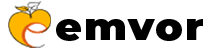
<style>
.page{position:relative;width:222px;height:49px;background:#ffffff}
.page>*{position:absolute;margin:0}
.t1{font:37.7px "Montserrat-Black";letter-spacing:0.04em;color:#000000;scale:1.09 1}
</style>
<div class="page">
<p class="t1" style="left:56px;top:19px;width:147px;height:22px">emvor</p>
</div>
